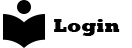
<style>
.page{position:relative;width:132px;height:48px;background:#ffffff}
.page>*{position:absolute;margin:0}
.t1{font:18.7px "Rockwell-ExtraBold";letter-spacing:0.025em;color:#000000}
</style>
<div class="page">
<p class="t1" style="left:54px;top:19px;width:66px;height:17px">Login</p>
</div>
